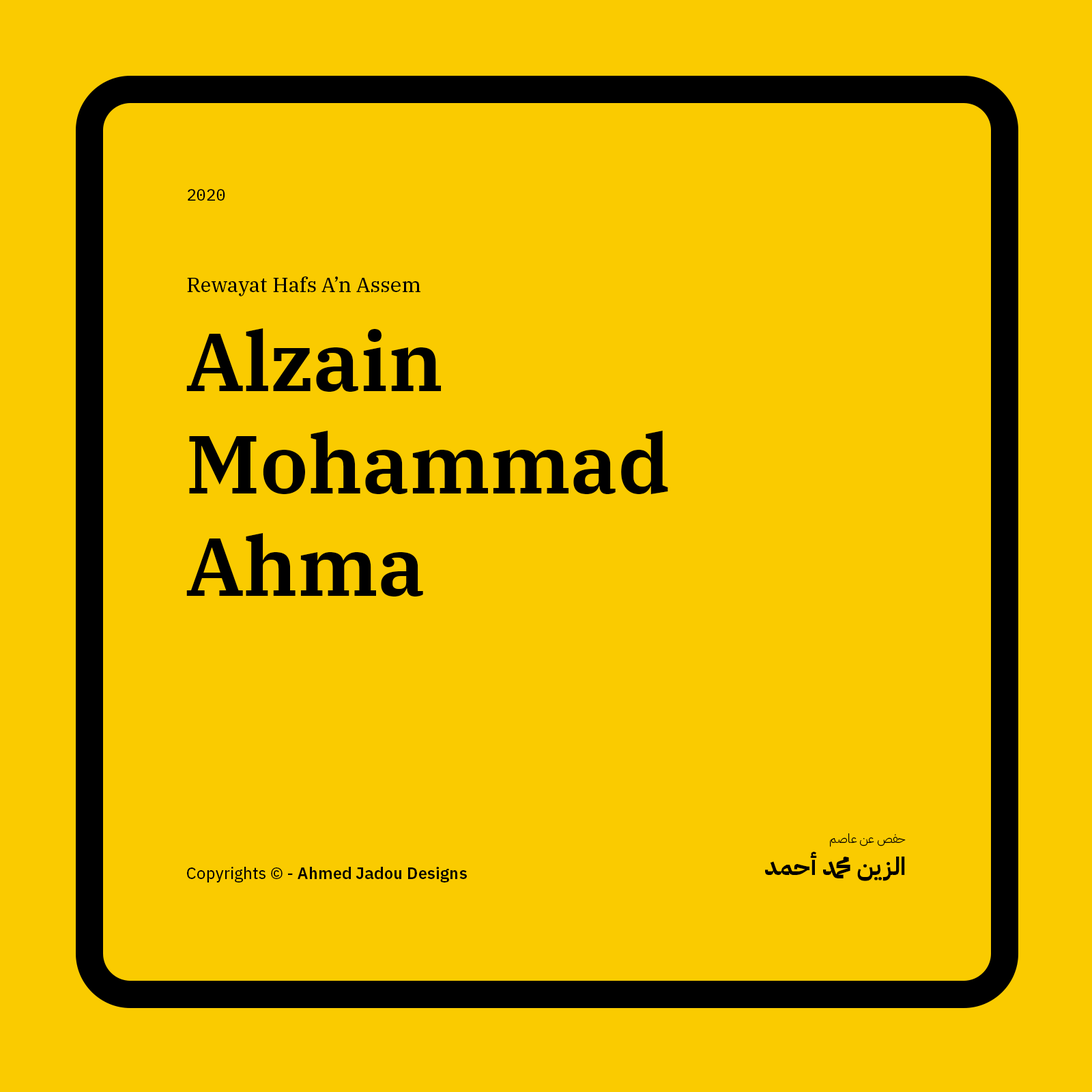
<style>
.page{position:relative;width:1092px;height:1092px;background:#facb00}
.page>*{position:absolute;margin:0}
.t1{font:16.4px "IBMPlexMono-Text";color:#000000}
.t2{font:20.5px "IBMPlexSerif-Text";color:#000000}
.t3{font:81.9px/102.7px "IBMPlexSerif-SemiBold";color:#000000}
.t4{font:12.3px "IBMPlexArabic-Light";color:#000000}
.t5{font:24.6px "IBMPlexArabic-Bold";color:#000000}
.t6{font:16.4px "IBMPlexSans-SemiBold";color:#000000}
.t7{font:16.4px "IBMPlexSans-Text";color:#000000}
</style>
<div class="page">
<p class="t1" style="left:188px;top:189px;width:37px;height:12px">2020</p>
<p class="t2" style="left:187px;top:276px;width:233px;height:20px">Rewayat Hafs A’n Assem</p>
<p class="t3" style="left:186px;top:328px;width:482px;height:268px">Alzain Mohammad Ahma</p>
<p class="t4" style="left:830px;top:833px;width:76px;height:14px">حفص عن عاصم</p>
<p class="t5" style="left:765px;top:852px;width:140px;height:29px">الزين محمد أحمد</p>
<p class="t6" style="left:187px;top:867px;width:280px;height:15px"><span class="t7">Copyrights © - </span>Ahmed Jadou Designs</p>
</div>
